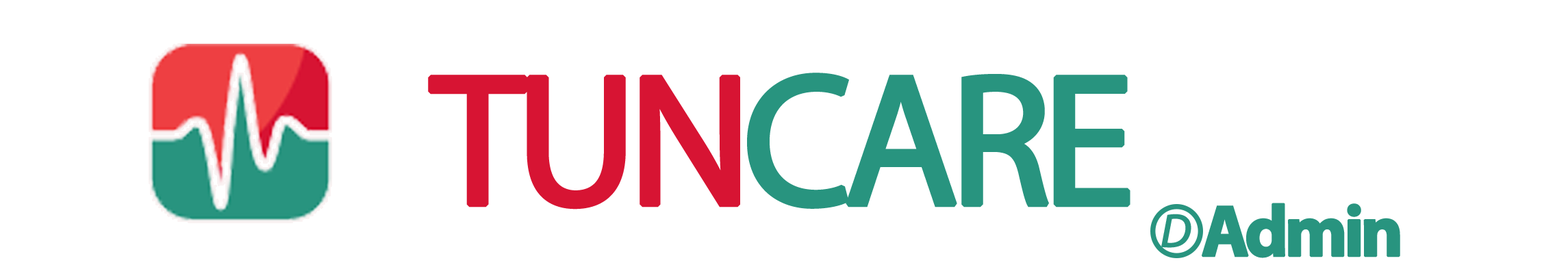
<style>
.page{position:relative;width:1568px;height:265px;background:#ffffff}
.page>*{position:absolute;margin:0}
.t1{font:188.1px "MyriadPro-Regular";letter-spacing:-0.075em;color:#28947f;font-weight:bold}
.t2{font:188.1px "MyriadPro-Regular";letter-spacing:-0.075em;color:#d71433;font-weight:bold}
.t3{font:73px "MyriadPro-Bold";letter-spacing:-0.075em;color:#28947f;font-weight:bold}
.t4{font:46.7px "MyriadPro-It";letter-spacing:-0.075em;color:#28947f;font-weight:bold}
</style>
<div class="page">
<p class="t1" style="left:428px;top:73px;width:702px;height:137px"><span class="t2">TUN</span>CARE</p>
<p class="t3" style="left:1202px;top:203px;width:198px;height:55px">Admin</p>
<p class="t4" style="left:1161px;top:214px;width:30px;height:34px">D</p>
</div>
